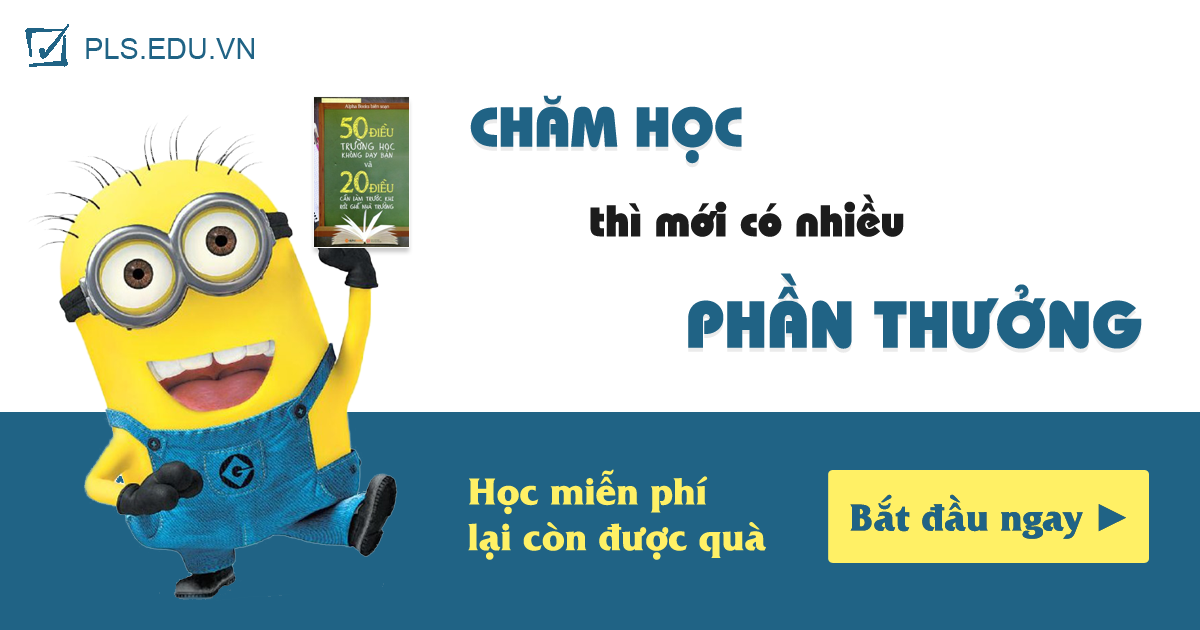
<style>
.page{position:relative;width:1200px;height:630px;background:#ffffff}
.page>*{position:absolute;margin:0}
.t1{font:29px "ArialMT";color:#206385}
.t2{font:56px "UVNBaiSauNang";color:#206385}
.t3{font:44px "UVNBaiSauNang";color:#1c1c1c}
.t4{font:66px "UVNBaiSauNang";color:#206385}
.t5{font:38px "UVNLacLongQuanBold";color:#fff065}
.t6{font:38px "UVNLacLongQuanBold";color:#206385}
.t7{font:38px "TimesNewRomanPSMT";color:#206385}
</style>
<div class="page">
<p class="t1" style="left:86px;top:38px;width:168px;height:21px">PLS.EDU.VN</p>
<p class="t2" style="left:470px;top:95px;width:272px;height:69px">CHĂM HỌC</p>
<p class="t3" style="left:590px;top:194px;width:314px;height:43px">thì mới có nhiều</p>
<p class="t4" style="left:688px;top:273px;width:454px;height:76px">PHẦN THƯỞNG</p>
<p class="t5" style="left:468px;top:469px;width:298px;height:91px">Học miễn phí<br>lại còn được quà</p>
<p class="t6" style="left:850px;top:494px;width:276px;height:45px">Bắt đầu ngay <span class="t7">►</span></p>
</div>
